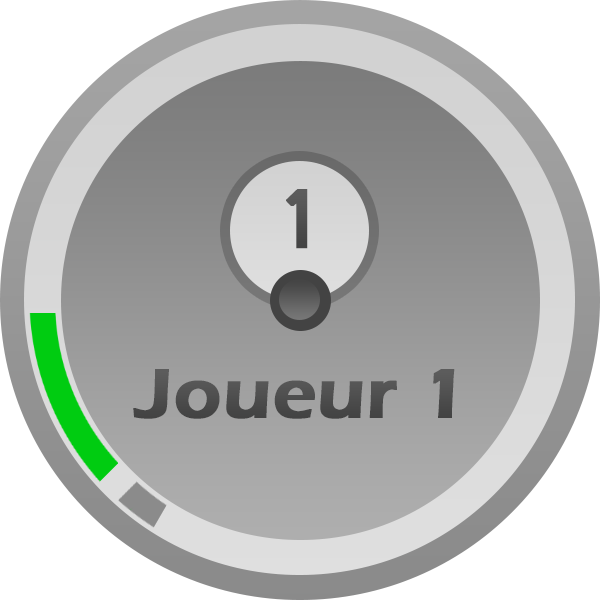
<style>
.page{position:relative;width:600px;height:600px;background:#ffffff}
.page>*{position:absolute;margin:0}
.t1{font:90px "Gautami";color:#4a4a4a;font-weight:bold;scale:1.06 1}
.t2{font:72px "ErasITC-Demi";color:#4a4a4a;font-weight:bold;scale:1.06 1}
</style>
<div class="page">
<p class="t1" style="left:286px;top:189px;width:22px;height:60px">1</p>
<p class="t2" style="left:133px;top:369px;width:322px;height:50px">Joueur 1</p>
</div>
